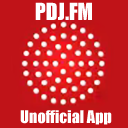
<style>
.page{position:relative;width:128px;height:128px;background:#c01318}
.page>*{position:absolute;margin:0}
.t1{font:21.6px "Impact";color:#ffffff}
.t2{font:16px "Impact";color:#ffffff}
</style>
<div class="page">
<p class="t1" style="left:35px;top:2px;width:57px;height:18px">PDJ.FM</p>
<p class="t2" style="left:20px;top:110px;width:92px;height:15px">Unofficial App</p>
</div>
